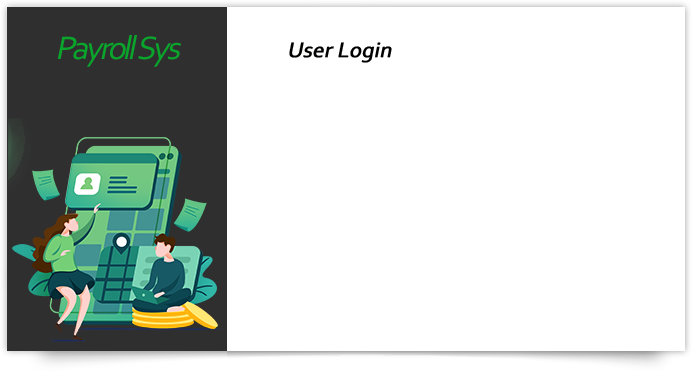
<style>
.page{position:relative;width:692px;height:373px;background:#ffffff}
.page>*{position:absolute;margin:0}
.t1{font:34px "Corbel";letter-spacing:-0.09em;color:#0aa62c;font-style:italic}
.t2{font:22px "Corbel";letter-spacing:-0.01em;color:#000000;font-weight:bold;font-style:italic}
</style>
<div class="page">
<p class="t1" style="left:58px;top:35px;width:123px;height:32px">Payroll Sys</p>
<p class="t2" style="left:289px;top:42px;width:103px;height:21px">User Login</p>
</div>
